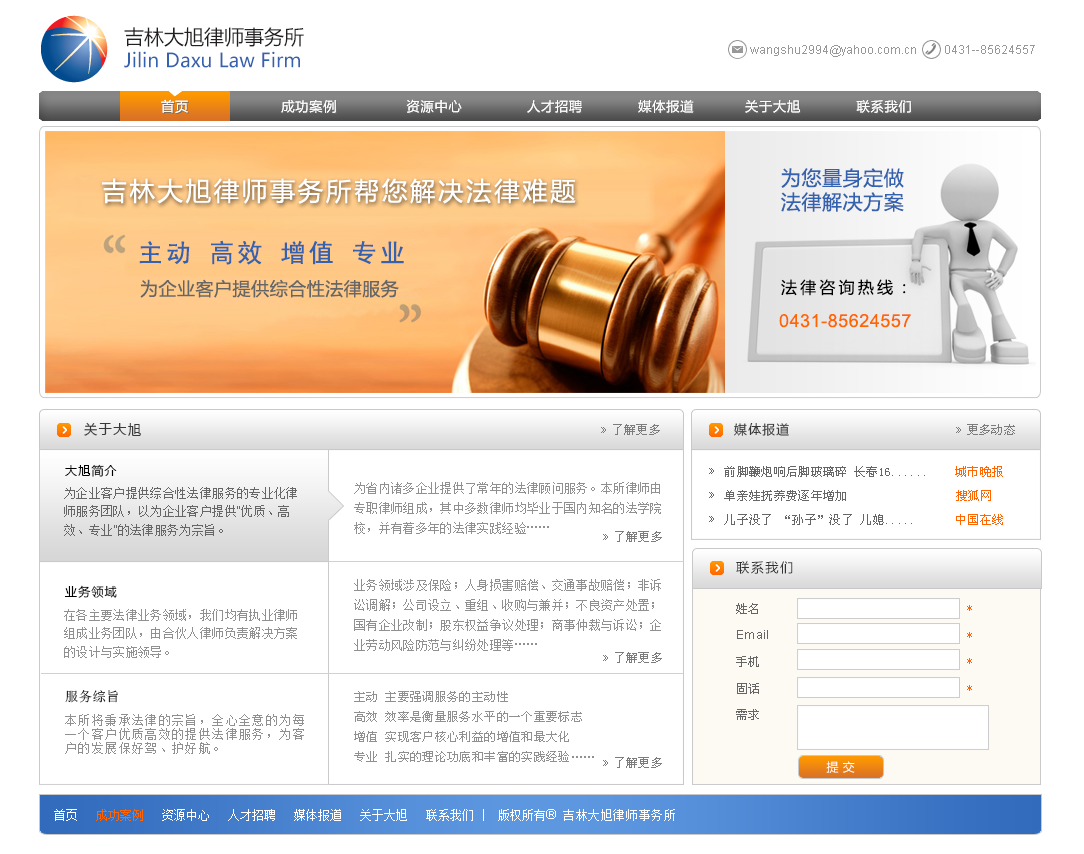
<style>
.page{position:relative;width:1084px;height:854px;background:#ffffff}
.page>*{position:absolute;margin:0}
.t1{font:19.5px "MicrosoftYaHei";color:#3562ae}
.t2{font:20px "MicrosoftYaHei";color:#231f20}
.t3{font:12px "ArialMT";color:#989898}
.t4{font:13.3px "MicrosoftYaHei";letter-spacing:0.05em;color:#fffefe}
.t5{font:20px "MicrosoftYaHei";letter-spacing:0.029em;color:#3562ae}
.t6{font:25.5px "MicrosoftYaHei";letter-spacing:0.1em;color:#ffffff}
.t7{font:25.5px "SimHei";letter-spacing:0.1em;color:#3562ae}
.t8{font:18px "MicrosoftYaHei";letter-spacing:0.029em;color:#666666}
.t9{font:16px "MicrosoftYaHei";letter-spacing:0.2em;color:#000000}
.t10{font:18px "ArialMT";letter-spacing:0.029em;color:#ff6500}
.t11{font:13.3px "MicrosoftYaHei";letter-spacing:0.1em;color:#393939}
.t12{font:12px "SimSun";letter-spacing:0.029em;color:#7c7c7c}
.t13{font:13.3px "ArialMT";letter-spacing:0.029em;color:#7c7c7c}
.t14{font:12.8px "MicrosoftYaHei";letter-spacing:0.1em;color:#393939}
.t15{font:12px "MicrosoftYaHei";letter-spacing:0.1em;color:#000000}
.t16{font:12px/24px "SimSun";letter-spacing:0.029em;color:#666666}
.t17{font:13.3px/24px "ArialMT";letter-spacing:0.029em;color:#666666}
.t18{font:12px/24px "SimSun";letter-spacing:0.029em;color:#ff6500}
.t19{font:12px/20px "SimSun";letter-spacing:0.029em;color:#909090}
.t20{font:12px/18.7px "SimSun";letter-spacing:0.029em;color:#666666}
.t21{font:12px/18.7px "ArialMT";letter-spacing:0.029em;color:#666666}
.t22{font:13.3px "MicrosoftYaHei";letter-spacing:0.1em;color:#333333}
.t23{font:12px/26.7px "SimSun";letter-spacing:0.029em;color:#666666}
.t24{font:12px/26.7px "ArialMT";letter-spacing:0.029em;color:#666666}
.t25{font:12px/26.7px "SimSun";letter-spacing:0.029em;color:#ff6500}
.t26{font:12px/18.7px "SimSun";letter-spacing:0.029em;color:#909090}
.t27{font:13.3px "SimSun";letter-spacing:0.029em}
.t28{font:13.3px/14px "SimSun";letter-spacing:0.029em;color:#909090}
.t29{font:12px "MicrosoftYaHei";letter-spacing:0.029em;color:#ffffff}
.t30{font:12px "SimSun";color:#ffffff}
.t31{font:12px "SimSun";color:#ff6500}
.t32{font:13.3px "ArialMT";color:#ffffff}
.t33{font:12px "SimSun";letter-spacing:0.05em;color:#ffffff}
</style>
<div class="page">
<p class="t1" style="left:124px;top:27px;width:180px;height:41px"><span class="t2">吉林大旭律师事务所<br></span>Jilin Daxu Law Firm</p>
<p class="t3" style="left:750px;top:45px;width:285px;height:12px">wangshu2994@yahoo.com.cn         0431--85624557</p>
<p class="t4" style="left:161px;top:99px;width:750px;height:14px">首页                    成功案例               资源中心              人才招聘            媒体报道           关于大旭            联系我们</p>
<p class="t4" style="left:161px;top:99px;width:750px;height:14px">首页                    成功案例               资源中心              人才招聘            媒体报道           关于大旭            联系我们</p>
<p class="t5" style="left:781px;top:168px;width:123px;height:44px">为您量身定做<br>法律解决方案</p>
<p class="t6" style="left:102px;top:178px;width:474px;height:26px">吉林大旭律师事务所帮您解决法律难题</p>
<p class="t7" style="left:139px;top:240px;width:265px;height:25px">主动 高效 增值 专业</p>
<p class="t8" style="left:140px;top:279px;width:259px;height:19px">为企业客户提供综合性法律服务</p>
<p class="t9" style="left:781px;top:279px;width:125px;height:17px">法律咨询热线：</p>
<p class="t10" style="left:779px;top:314px;width:132px;height:14px">0431-85624557</p>
<p class="t11" style="left:84px;top:422px;width:57px;height:14px">关于大旭</p>
<p class="t12" style="left:601px;top:424px;width:59px;height:11px"><span class="t13">» </span>了解更多</p>
<p class="t14" style="left:734px;top:423px;width:55px;height:13px">媒体报道</p>
<p class="t12" style="left:956px;top:424px;width:59px;height:11px"><span class="t13">» </span>更多动态</p>
<p class="t15" style="left:65px;top:464px;width:52px;height:13px">大旭简介</p>
<p class="t16" style="left:709px;top:466px;width:294px;height:59px"><span class="t17">»  </span>前脚鞭炮响后脚玻璃碎 长春16......    <span class="t18">城市晚报<br></span><span class="t17">»  </span>单亲娃抚养费逐年增加                 <span class="t18">搜狐网<br></span><span class="t17">»  </span>儿子没了 “孙子”没了 儿媳.....      <span class="t18">中国在线</span></p>
<p class="t19" style="left:354px;top:482px;width:307px;height:52px">为省内诸多企业提供了常年的法律顾问服务。本所律师由专职律师组成，其中多数律师均毕业于国内知名的法学院校，并有着多年的法律实践经验……</p>
<p class="t20" style="left:64px;top:487px;width:233px;height:49px">为企业客户提供综合性法律服务的专业化律师服务团队，以为企业客户提供<span class="t21">“</span>优质、高效、专业<span class="t21">”</span>的法律服务为宗旨。</p>
<p class="t12" style="left:603px;top:531px;width:59px;height:11px"><span class="t13">» </span>了解更多</p>
<p class="t22" style="left:736px;top:561px;width:57px;height:13px">联系我们</p>
<p class="t19" style="left:354px;top:579px;width:307px;height:72px">业务领域涉及保险；人身损害赔偿、交通事故赔偿；非诉讼调解；公司设立、重组、收购与兼并；不良资产处置；国有企业改制；股东权益争议处理；商事仲裁与诉讼；企业劳动风险防范与纠纷处理等……</p>
<p class="t15" style="left:65px;top:585px;width:52px;height:13px">业务领域</p>
<p class="t23" style="left:736px;top:603px;width:32px;height:117px">姓名<br><span class="t24">Email<br></span>手机<br>固话<br>需求</p>
<p class="t25" style="left:967px;top:605px;width:5px;height:86px">*<br>*<br>*<br>*</p>
<p class="t26" style="left:64px;top:609px;width:233px;height:49px">在各主要法律业务领域，我们均有执业律师组成业务团队，由合伙人律师负责解决方案的设计与实施领导。</p>
<p class="t12" style="left:603px;top:652px;width:59px;height:11px"><span class="t13">» </span>了解更多</p>
<p class="t27" style="left:65px;top:690px;width:53px;height:13px">服务综旨</p>
<p class="t19" style="left:354px;top:691px;width:240px;height:71px">主动  主要强调服务的主动性<br>高效  效率是衡量服务水平的一个重要标志<br>增值  实现客户核心利益的增值和最大化<br>专业  扎实的理论功底和丰富的实践经验……</p>
<p class="t28" style="left:65px;top:714px;width:239px;height:40px">本所将秉承法律的宗旨，全心全意的为每一个客户优质高效的提供法律服务，为客户的发展保好驾、护好航。</p>
<p class="t12" style="left:603px;top:757px;width:59px;height:11px"><span class="t13">» </span>了解更多</p>
<p class="t29" style="left:826px;top:761px;width:29px;height:12px">提 交</p>
<p class="t30" style="left:54px;top:809px;width:621px;height:12px">首页   <span class="t31">成功案例 </span>  资源中心   人才招聘   媒体报道   关于大旭   联系我们 |  版权所有<span class="t32">® </span><span class="t33">吉林大旭律师事务所</span></p>
</div>
